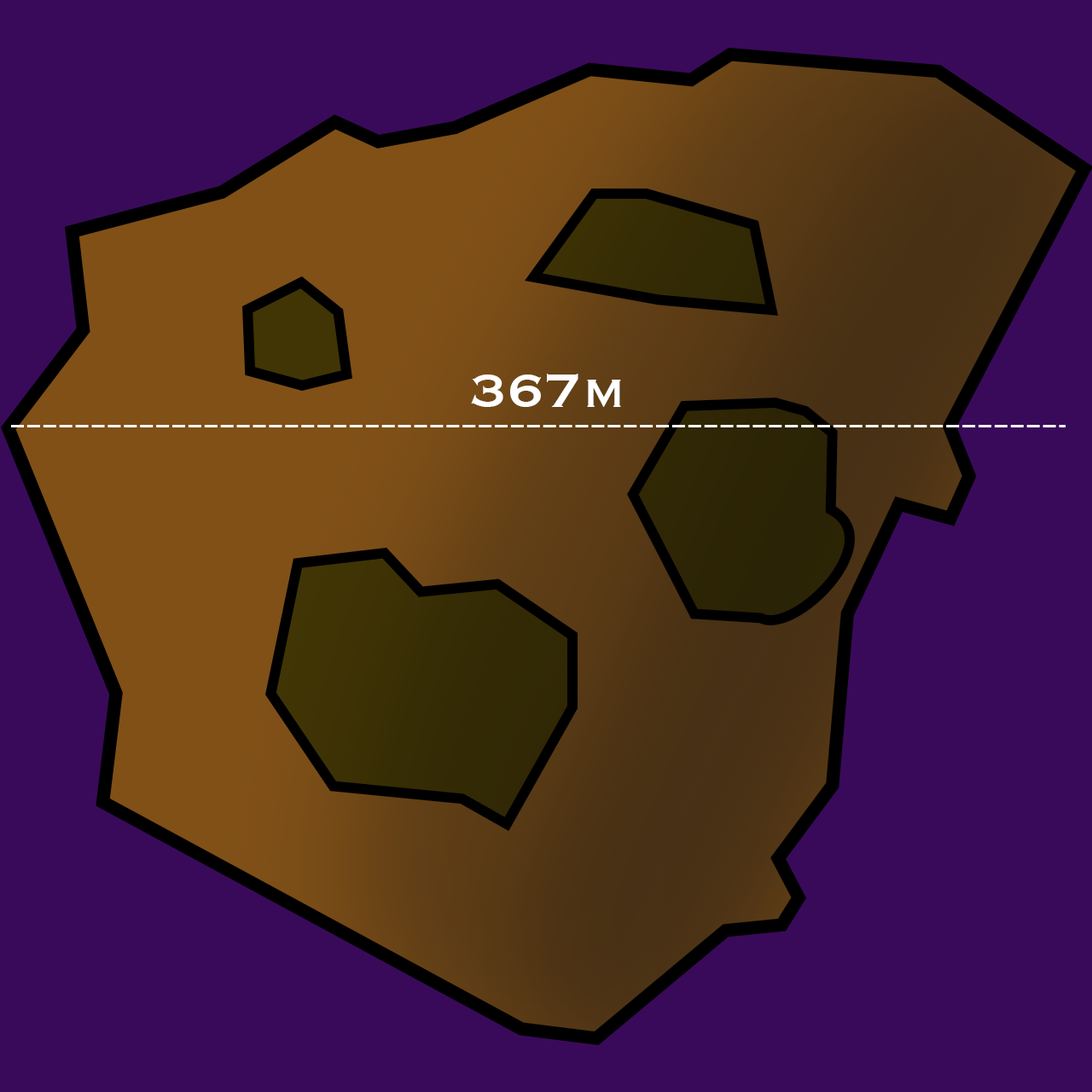
<style>
.page{position:relative;width:1092px;height:1092px;background:#390a59}
.page>*{position:absolute;margin:0}
.t1{font:61.4px "Copperplate";color:#ffffff}
</style>
<div class="page">
<p class="t1" style="left:471px;top:374px;width:150px;height:33px">367m</p>
</div>
